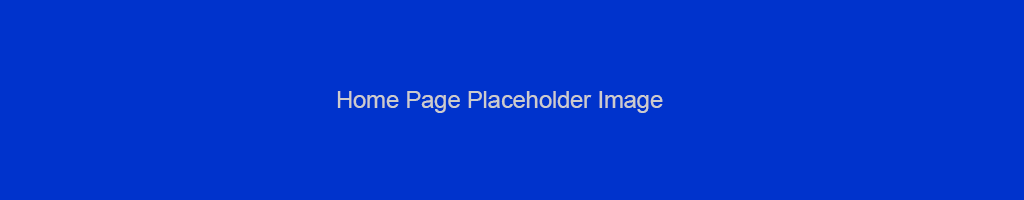
<style>
.page{position:relative;width:1024px;height:200px;background:#0033cc}
.page>*{position:absolute;margin:0}
.t1{font:24px "ArialMT";letter-spacing:-0.01em;color:#cccccc}
</style>
<div class="page">
<p class="t1" style="left:337px;top:91px;width:326px;height:22px">Home Page Placeholder Image</p>
</div>
